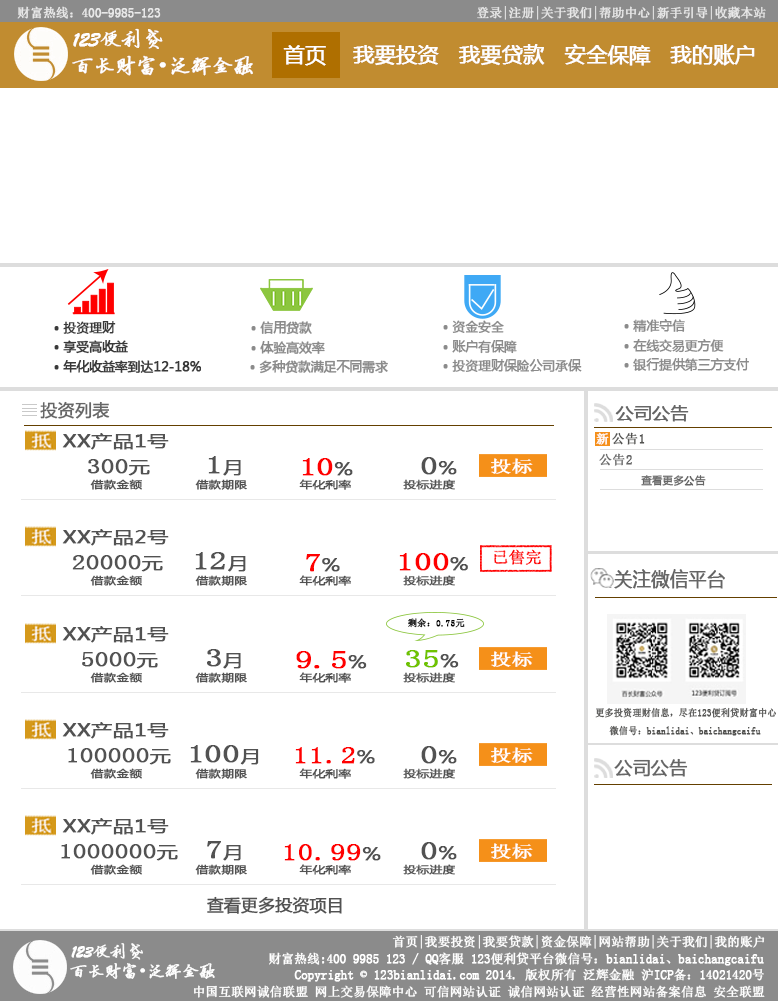
<style>
.page{position:relative;width:778px;height:1001px;background:#ffffff}
.page>*{position:absolute;margin:0}
.t1{font:12.5px "SimSun";color:#e8e8e8;font-weight:bold}
.t2{font:20.8px "BrushScriptMT";color:#ffffff;font-weight:bold}
.t3{font:20.8px "FZYBXSJW--GB1-0";color:#ffffff;font-weight:bold}
.t4{font:20.8px "MicrosoftYaHei";color:#ffffff;font-weight:bold}
.t5{font:20.8px "SimSun";color:#ffffff;font-weight:bold}
.t6{font:12.5px "MicrosoftYaHei";color:#393939;font-weight:bold}
.t7{font:12.5px "MicrosoftYaHei";color:#8b8b8b;font-weight:bold}
.t8{font:16.7px "MicrosoftYaHei";color:#666666;font-weight:bold}
.t9{font:16.7px "MicrosoftYaHei";color:#666666;font-weight:bold;scale:1.06 1}
.t10{font:16.5px "MicrosoftYaHei";color:#525252;font-weight:bold;scale:1.27 1}
.t11{font:12.5px "SimSun";color:#ffffff;font-weight:bold}
.t12{font:12.5px "SimSun";color:#525250;font-weight:bold;scale:1.06 1}
.t13{font:20.8px "SimSun";color:#525252;font-weight:bold;scale:1.27 1}
.t14{font:26.4px "SimSun";color:#525252;font-weight:bold;scale:1.27 1}
.t15{font:26.4px "SimSun";color:#ff0000;font-weight:bold;scale:1.27 1}
.t16{font:16.5px "SimSun";color:#ffffff;font-weight:bold;scale:1.27 1}
.t17{font:12.5px "SimSun";color:#666666;font-weight:bold;scale:1.06 1}
.t18{font:9.9px "MicrosoftYaHei";color:#525252;font-weight:bold;scale:1.27 1}
.t19{font:10.4px "MicrosoftYaHei";color:#666666;font-weight:bold}
.t20{font:19.7px "MicrosoftYaHei";color:#666666;font-weight:bold;scale:0.92 1}
.t21{font:9.2px "SimSun";color:#000000;font-weight:bold}
.t22{font:26.4px "SimSun";color:#6fc200;font-weight:bold;scale:1.27 1}
.t23{font:9.8px "SimSun";color:#525250;font-weight:bold;scale:0.92 1}
.t24{font:23.8px "SimSun";color:#ff0000;font-weight:bold;scale:1.27 1}
.t25{font:17.9px "MicrosoftYaHei";color:#666666;font-weight:bold}
.t26{font:24px "SimSun";color:#ff0000;font-weight:bold;scale:1.27 1}
.t27{font:16.7px "MicrosoftYaHei";color:#525252;font-weight:bold}
.t28{font:16.7px "BrushScriptMT";color:#ffffff;font-weight:bold}
.t29{font:16.7px "FZYBXSJW--GB1-0";color:#ffffff;font-weight:bold}
.t30{font:16.7px "SimSun";color:#ffffff;font-weight:bold}
</style>
<div class="page">
<p class="t1" style="left:17px;top:6px;width:144px;height:13px">财富热线：400-9985-123</p>
<p class="t1" style="left:477px;top:6px;width:289px;height:14px">登录|注册|关于我们|帮助中心|新手引导|收藏本站</p>
<p class="t2" style="left:73px;top:28px;width:90px;height:21px">123<span class="t3">便利贷</span></p>
<p class="t4" style="left:283px;top:44px;width:472px;height:22px">首页    我要投资   我要贷款   安全保障   我的账户</p>
<p class="t3" style="left:72px;top:55px;width:181px;height:21px">百长财富<span class="t5">•</span>泛辉金融</p>
<p class="t6" style="left:54px;top:321px;width:62px;height:13px">• 投资理财</p>
<p class="t7" style="left:251px;top:321px;width:61px;height:14px">• 信用贷款</p>
<p class="t7" style="left:443px;top:320px;width:61px;height:13px">• 资金安全</p>
<p class="t7" style="left:624px;top:319px;width:61px;height:13px">• 精准守信</p>
<p class="t6" style="left:54px;top:340px;width:74px;height:14px">• 享受高收益</p>
<p class="t7" style="left:251px;top:341px;width:74px;height:13px">• 体验高效率</p>
<p class="t7" style="left:443px;top:340px;width:74px;height:14px">• 账户有保障</p>
<p class="t7" style="left:624px;top:339px;width:100px;height:14px">• 在线交易更方便</p>
<p class="t6" style="left:54px;top:360px;width:148px;height:13px">• 年化收益率到达12-18%</p>
<p class="t7" style="left:250px;top:360px;width:138px;height:14px">• 多种贷款满足不同需求</p>
<p class="t7" style="left:443px;top:359px;width:139px;height:13px">• 投资理财保险公司承保</p>
<p class="t7" style="left:624px;top:358px;width:125px;height:14px">• 银行提供第三方支付</p>
<p class="t8" style="left:40px;top:401px;width:70px;height:18px">投资列表</p>
<p class="t9" style="left:615px;top:405px;width:74px;height:17px">公司公告</p>
<p class="t10" style="left:62px;top:433px;width:107px;height:17px">XX产品1号</p>
<p class="t11" style="left:596px;top:432px;width:13px;height:13px">新</p>
<p class="t12" style="left:612px;top:432px;width:33px;height:13px">公告1</p>
<p class="t13" style="left:88px;top:459px;width:62px;height:17px">300<span class="t10">元</span></p>
<p class="t14" style="left:208px;top:456px;width:33px;height:20px">1<span class="t10">月</span></p>
<p class="t15" style="left:302px;top:458px;width:51px;height:18px">10<span class="t10">%</span></p>
<p class="t14" style="left:421px;top:457px;width:36px;height:18px">0<span class="t10">%</span></p>
<p class="t16" style="left:491px;top:458px;width:42px;height:16px">投标</p>
<p class="t17" style="left:599px;top:453px;width:33px;height:13px">公告2</p>
<p class="t18" style="left:90px;top:479px;width:52px;height:11px">借款金额</p>
<p class="t18" style="left:195px;top:479px;width:52px;height:11px">借款期限</p>
<p class="t18" style="left:299px;top:479px;width:52px;height:11px">年化利率</p>
<p class="t18" style="left:403px;top:479px;width:52px;height:11px">投标进度</p>
<p class="t19" style="left:641px;top:475px;width:65px;height:11px">查看更多公告</p>
<p class="t10" style="left:62px;top:529px;width:107px;height:17px">XX产品2号</p>
<p class="t13" style="left:72px;top:555px;width:91px;height:17px">20000<span class="t10">元</span></p>
<p class="t14" style="left:195px;top:552px;width:51px;height:20px">12<span class="t10">月</span></p>
<p class="t15" style="left:306px;top:554px;width:34px;height:18px">7<span class="t10">%</span></p>
<p class="t15" style="left:399px;top:553px;width:69px;height:18px">100<span class="t10">%</span></p>
<p class="t20" style="left:614px;top:569px;width:111px;height:20px">关注微信平台</p>
<p class="t18" style="left:90px;top:575px;width:52px;height:11px">借款金额</p>
<p class="t18" style="left:195px;top:575px;width:52px;height:11px">借款期限</p>
<p class="t18" style="left:299px;top:575px;width:52px;height:11px">年化利率</p>
<p class="t18" style="left:403px;top:575px;width:52px;height:11px">投标进度</p>
<p class="t10" style="left:62px;top:626px;width:107px;height:17px">XX产品1号</p>
<p class="t21" style="left:408px;top:618px;width:57px;height:10px">剩余：0.75元</p>
<p class="t13" style="left:82px;top:652px;width:76px;height:17px">5000<span class="t10">元</span></p>
<p class="t14" style="left:207px;top:649px;width:34px;height:20px">3<span class="t10">月</span></p>
<p class="t15" style="left:296px;top:651px;width:71px;height:18px">9.5<span class="t10">%</span></p>
<p class="t22" style="left:406px;top:650px;width:53px;height:18px">35<span class="t10">%</span></p>
<p class="t16" style="left:491px;top:651px;width:42px;height:16px">投标</p>
<p class="t18" style="left:90px;top:672px;width:52px;height:11px">借款金额</p>
<p class="t18" style="left:195px;top:672px;width:52px;height:11px">借款期限</p>
<p class="t18" style="left:299px;top:672px;width:52px;height:11px">年化利率</p>
<p class="t18" style="left:403px;top:672px;width:52px;height:11px">投标进度</p>
<p class="t23" style="left:595px;top:707px;width:181px;height:29px">更多投资理财信息，尽在123便利贷财富中心<br>   微信号：bianlidai、baichangcaifu</p>
<p class="t10" style="left:62px;top:722px;width:107px;height:17px">XX产品1号</p>
<p class="t13" style="left:68px;top:748px;width:103px;height:17px">100000<span class="t10">元</span></p>
<p class="t14" style="left:190px;top:745px;width:69px;height:20px">100<span class="t10">月</span></p>
<p class="t24" style="left:295px;top:747px;width:80px;height:17px">11.2<span class="t10">%</span></p>
<p class="t14" style="left:421px;top:746px;width:36px;height:18px">0<span class="t10">%</span></p>
<p class="t16" style="left:491px;top:747px;width:42px;height:16px">投标</p>
<p class="t25" style="left:614px;top:758px;width:74px;height:19px">公司公告</p>
<p class="t18" style="left:90px;top:768px;width:52px;height:11px">借款金额</p>
<p class="t18" style="left:195px;top:768px;width:52px;height:11px">借款期限</p>
<p class="t18" style="left:299px;top:768px;width:52px;height:11px">年化利率</p>
<p class="t18" style="left:403px;top:768px;width:52px;height:11px">投标进度</p>
<p class="t10" style="left:62px;top:818px;width:107px;height:17px">XX产品1号</p>
<p class="t13" style="left:61px;top:844px;width:117px;height:17px">1000000<span class="t10">元</span></p>
<p class="t14" style="left:207px;top:841px;width:34px;height:20px">7<span class="t10">月</span></p>
<p class="t26" style="left:284px;top:844px;width:97px;height:17px">10.99<span class="t10">%</span></p>
<p class="t14" style="left:421px;top:842px;width:36px;height:18px">0<span class="t10">%</span></p>
<p class="t16" style="left:491px;top:843px;width:42px;height:16px">投标</p>
<p class="t18" style="left:90px;top:864px;width:52px;height:11px">借款金额</p>
<p class="t18" style="left:195px;top:864px;width:52px;height:11px">借款期限</p>
<p class="t18" style="left:299px;top:864px;width:52px;height:11px">年化利率</p>
<p class="t18" style="left:403px;top:864px;width:52px;height:11px">投标进度</p>
<p class="t27" style="left:207px;top:896px;width:135px;height:18px">查看更多投资项目</p>
<p class="t11" style="left:392px;top:935px;width:373px;height:14px">首页|我要投资|我要贷款|资金保障|网站帮助|关于我们|我的账户</p>
<p class="t28" style="left:71px;top:943px;width:72px;height:17px">123<span class="t29">便利贷</span></p>
<p class="t11" style="left:269px;top:952px;width:495px;height:14px">财富热线:400 9985 123 / QQ客服 123便利贷平台微信号：bianlidai、baichangcaifu</p>
<p class="t29" style="left:70px;top:963px;width:145px;height:16px">百长财富<span class="t30">•</span>泛辉金融</p>
<p class="t11" style="left:294px;top:968px;width:470px;height:14px">Copyright © 123bianlidai.com 2014. 版权所有 泛辉金融 沪ICP备：14021420号</p>
<p class="t11" style="left:194px;top:985px;width:571px;height:13px">中国互联网诚信联盟 网上交易保障中心 可信网站认证 诚信网站认证 经营性网站备案信息 安全联盟</p>
</div>
